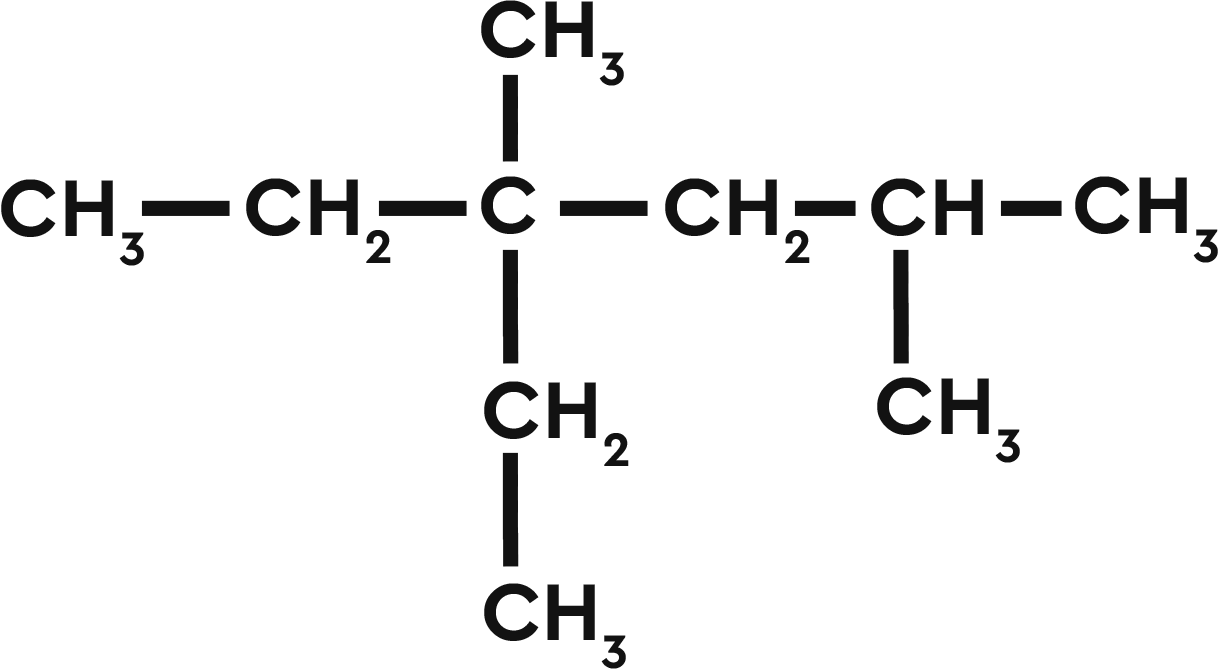
<style>
.page{position:relative;width:1218px;height:669px;background:#ffffff}
.page>*{position:absolute;margin:0}
.t1{font:84.4px "CeraPro-Bold";color:#121212}
.t2{font:133.1px "CeraPro-Bold";color:#121212}
</style>
<div class="page">
<p class="t1" style="left:481px;top:0px;width:143px;height:86px">CH3</p>
<p class="t2" style="left:502px;top:74px;width:16px;height:88px;rotate:90deg">---</p>
<p class="t1" style="left:1px;top:179px;width:143px;height:87px">CH3</p>
<p class="t1" style="left:246px;top:178px;width:145px;height:85px">CH2</p>
<p class="t1" style="left:481px;top:176px;width:55px;height:58px">C</p>
<p class="t1" style="left:665px;top:178px;width:145px;height:85px">CH2</p>
<p class="t1" style="left:871px;top:178px;width:112px;height:58px">CH</p>
<p class="t1" style="left:1075px;top:176px;width:143px;height:87px">CH3</p>
<p class="t2" style="left:141px;top:200px;width:89px;height:16px">---</p>
<p class="t2" style="left:378px;top:200px;width:89px;height:16px">---</p>
<p class="t2" style="left:559px;top:200px;width:89px;height:16px">---</p>
<p class="t2" style="left:794px;top:200px;width:62px;height:16px">--</p>
<p class="t2" style="left:1000px;top:200px;width:62px;height:16px">--</p>
<p class="t2" style="left:502px;top:249px;width:17px;height:115px;rotate:90deg">----</p>
<p class="t2" style="left:893px;top:249px;width:16px;height:115px;rotate:90deg">----</p>
<p class="t1" style="left:877px;top:377px;width:143px;height:86px">CH3</p>
<p class="t1" style="left:484px;top:381px;width:145px;height:85px">CH2</p>
<p class="t2" style="left:502px;top:452px;width:17px;height:115px;rotate:90deg">----</p>
<p class="t1" style="left:484px;top:583px;width:142px;height:86px">CH3</p>
</div>
